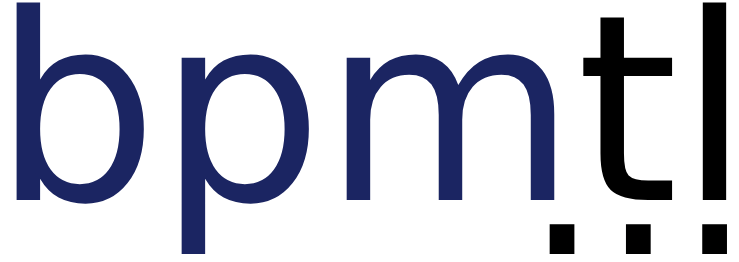
<style>
.page{position:relative;width:739px;height:262px;background:#ffffff}
.page>*{position:absolute;margin:0}
.t1{font:260px "LEMONMILK-Regular";color:#1b2562}
.t2{font:260px "LEMONMILK-Regular";color:#000000}
.t3{font:240px "LEMONMILK-Regular";color:#000000}
</style>
<div class="page">
<p class="t1" style="left:16px;top:2px;width:711px;height:253px">bpm<span class="t2">tl</span></p>
<p class="t3" style="left:549px;top:224px;width:178px;height:30px">...</p>
</div>
